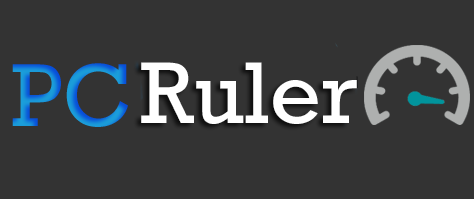
<style>
.page{position:relative;width:474px;height:199px;background:#333333}
.page>*{position:absolute;margin:0}
.t1{font:89px "Rockwell";color:#ffffff}
</style>
<div class="page">
<p class="t1" style="left:141px;top:62px;width:216px;height:62px">Ruler</p>
</div>
